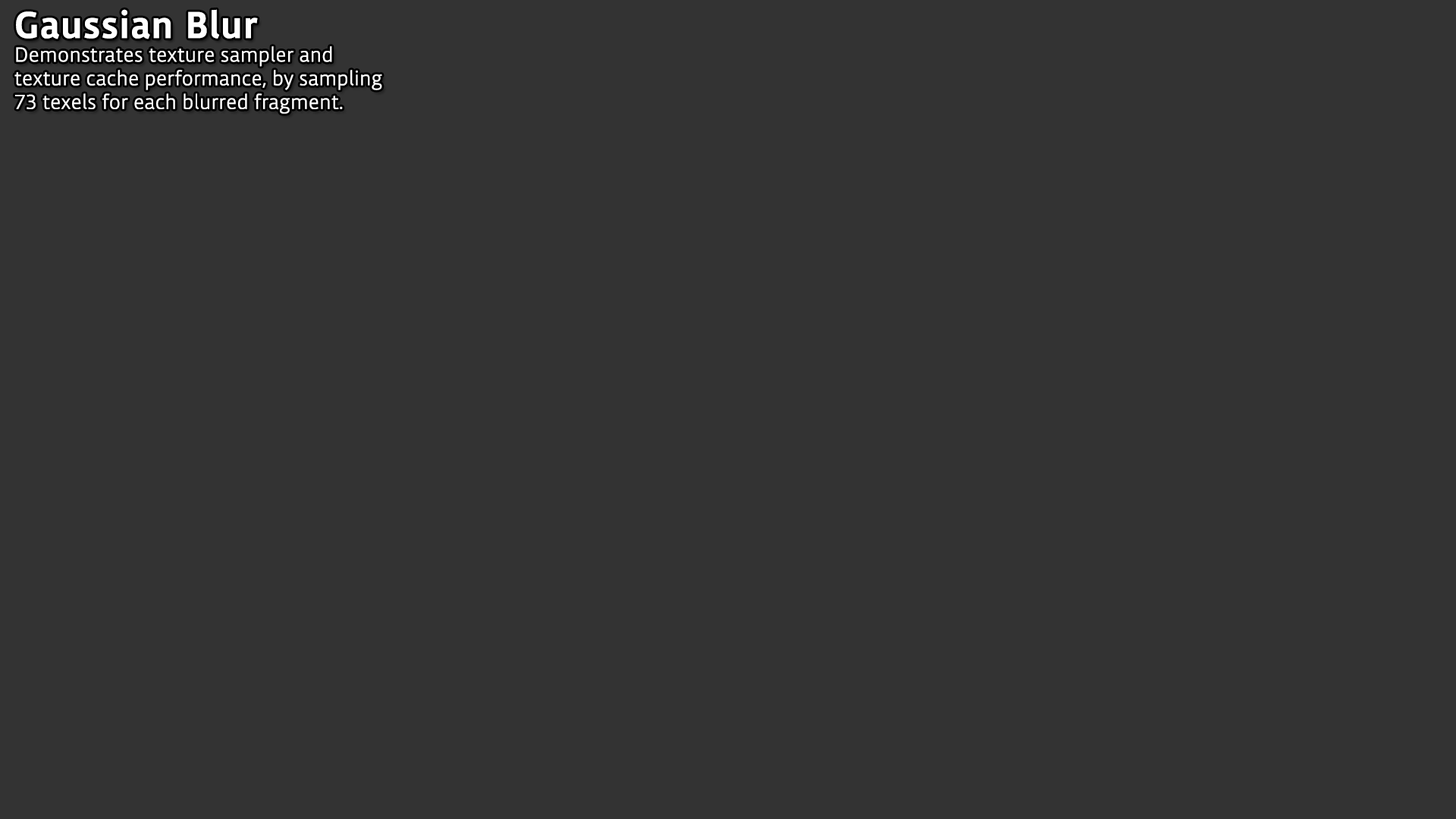
<style>
.page{position:relative;width:1456px;height:819px;background:#333333}
.page>*{position:absolute;margin:0}
.t1{font:19.7px "Tipperary";color:#ffffff;font-weight:bold}
.t2{font:36.4px "Tipperary-Bold";color:#ffffff;font-weight:bold}
</style>
<div class="page">
<p class="t1" style="left:14px;top:9px;width:368px;height:105px"><span class="t2">Gaussian Blur<br></span>Demonstrates texture sampler and <br>texture cache performance, by sampling <br>73 texels for each blurred fragment.</p>
</div>
